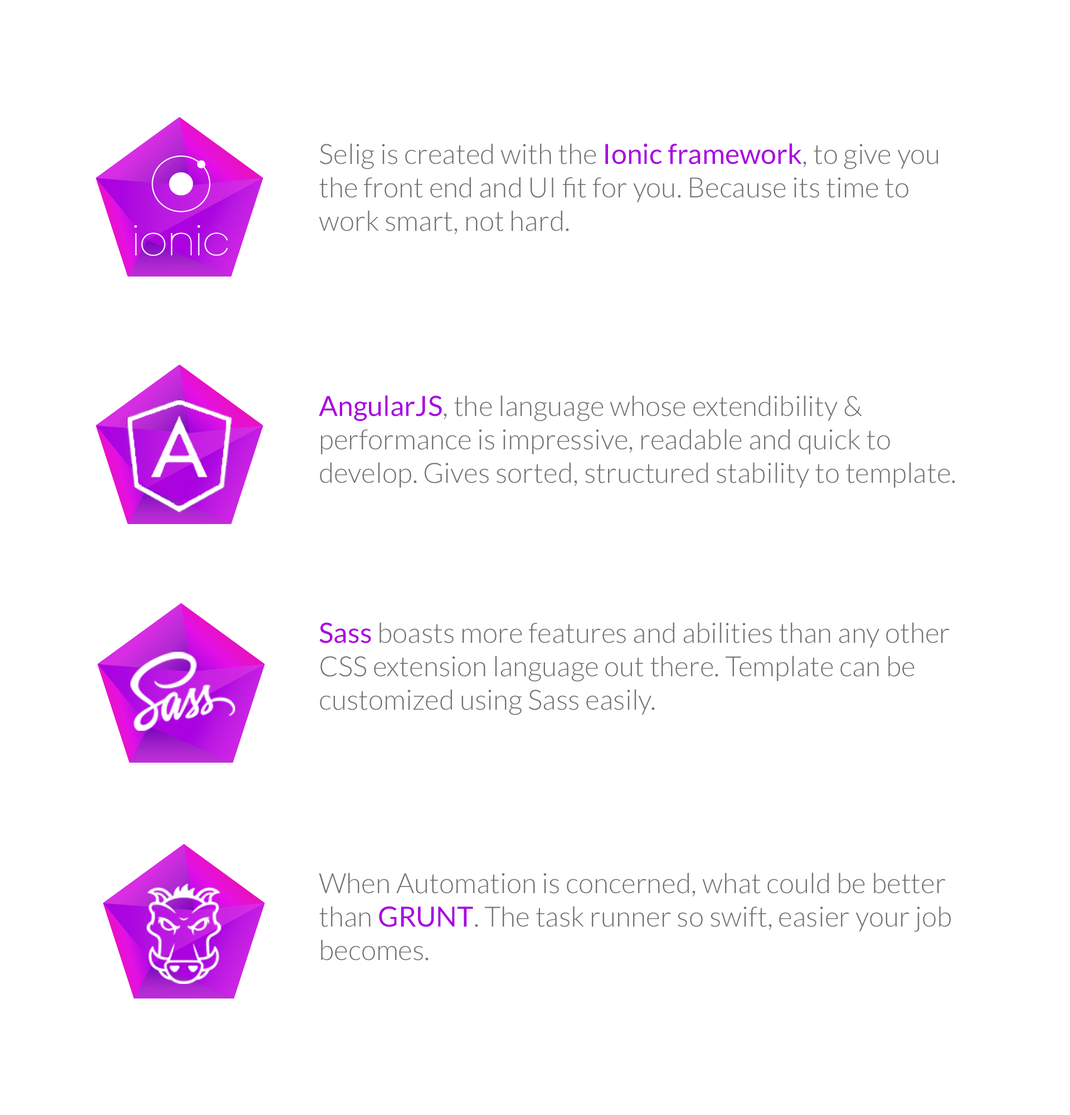
<style>
.page{position:relative;width:1070px;height:1115px;background:#ffffff}
.page>*{position:absolute;margin:0}
.t1{font:27.9px "Lato-Light";color:#727272}
.t2{font:27.9px "Lato-Regular";color:#aa03e0}
</style>
<div class="page">
<p class="t1" style="left:319px;top:143px;width:619px;height:92px">Selig is created with the <span class="t2">Ionic framework</span>, to give you the front end and UI fit for you. Because its time to work smart, not hard.</p>
<p class="t1" style="left:319px;top:395px;width:636px;height:93px"><span class="t2">AngularJS</span>, the language whose extendibility &amp; performance is impressive, readable and quick to develop. Gives sorted, structured stability to template.</p>
<p class="t1" style="left:319px;top:622px;width:631px;height:93px"><span class="t2">Sass </span>boasts more features and abilities than any other CSS extension language out there. Template can be customized using Sass easily.</p>
<p class="t1" style="left:319px;top:872px;width:632px;height:88px">When Automation is concerned, what could be better than <span class="t2">GRUNT</span>. The task runner so swift, easier your job becomes.</p>
</div>
